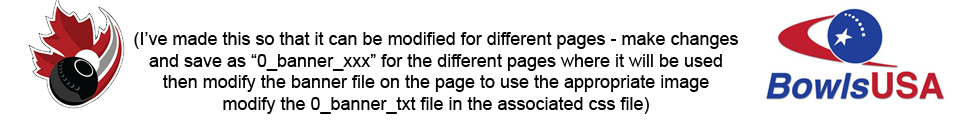
<style>
.page{position:relative;width:960px;height:140px;background:#ffffff}
.page>*{position:absolute;margin:0}
.t1{font:18px "ArialMT";color:#030000}
</style>
<div class="page">
<p class="t1" style="left:134px;top:32px;width:604px;height:82px;text-align:center">(I’ve made this so that it can be modified for different pages - make changes<br>and save as “0_banner_xxx” for the different pages where it will be used<br>then modify the banner file on the page to use the appropriate image<br>modify the 0_banner_txt file in the associated css file)</p>
</div>
